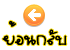
<style>
.page{position:relative;width:70px;height:50px;background:#ffffff}
.page>*{position:absolute;margin:0}
.t1{font:24px "DSSPoppy";color:#000000}
</style>
<div class="page">
<p class="t1" style="left:2px;top:20px;width:65px;height:26px">ย้อนกลับ</p>
</div>
